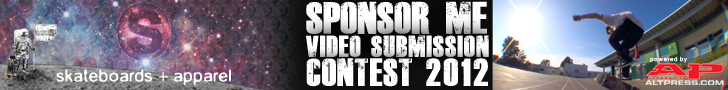
<style>
.page{position:relative;width:728px;height:90px}
.page>*{position:absolute;margin:0}
.t1{font:31.6px "DeadKansas";color:#ffffff}
.t2{font:21px "DeadKansas";letter-spacing:-0.005em;color:#ffffff}
.t3{font:27.2px "DeadKansas";letter-spacing:-0.005em;color:#ffffff}
.t4{font:27.2px "DeadKansas";letter-spacing:0.075em;color:#ffffff}
.t5{font:5.5px "Gaussian-Blur-Regular";letter-spacing:0.1em;color:#ffffff}
.t6{font:16.8px "Gaussian-Blur-Regular";letter-spacing:-0.025em;color:#ffffff}
.t7{font:16.8px "MyriadPro-Regular";letter-spacing:-0.025em;color:#ffffff}
</style>
<div class="page">
<p class="t1" style="left:306px;top:1px;width:181px;height:33px">SPONSOR me</p>
<p class="t2" style="left:306px;top:35px;width:183px;height:22px">video submission</p>
<p class="t3" style="left:306px;top:58px;width:182px;height:29px">contest <span class="t4">2012</span></p>
<p class="t5" style="left:650px;top:56px;width:37px;height:7px">powered by</p>
<p class="t6" style="left:56px;top:69px;width:175px;height:16px">skateboards <span class="t7">+  </span>apparel</p>
</div>
